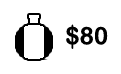
<style>
.page{position:relative;width:121px;height:74px;background:#ffffff}
.page>*{position:absolute;margin:0}
.t1{font:24px "ArialRoundedMTBold";color:#000000}
</style>
<div class="page">
<p class="t1" style="left:66px;top:24px;width:42px;height:25px">$80</p>
</div>
